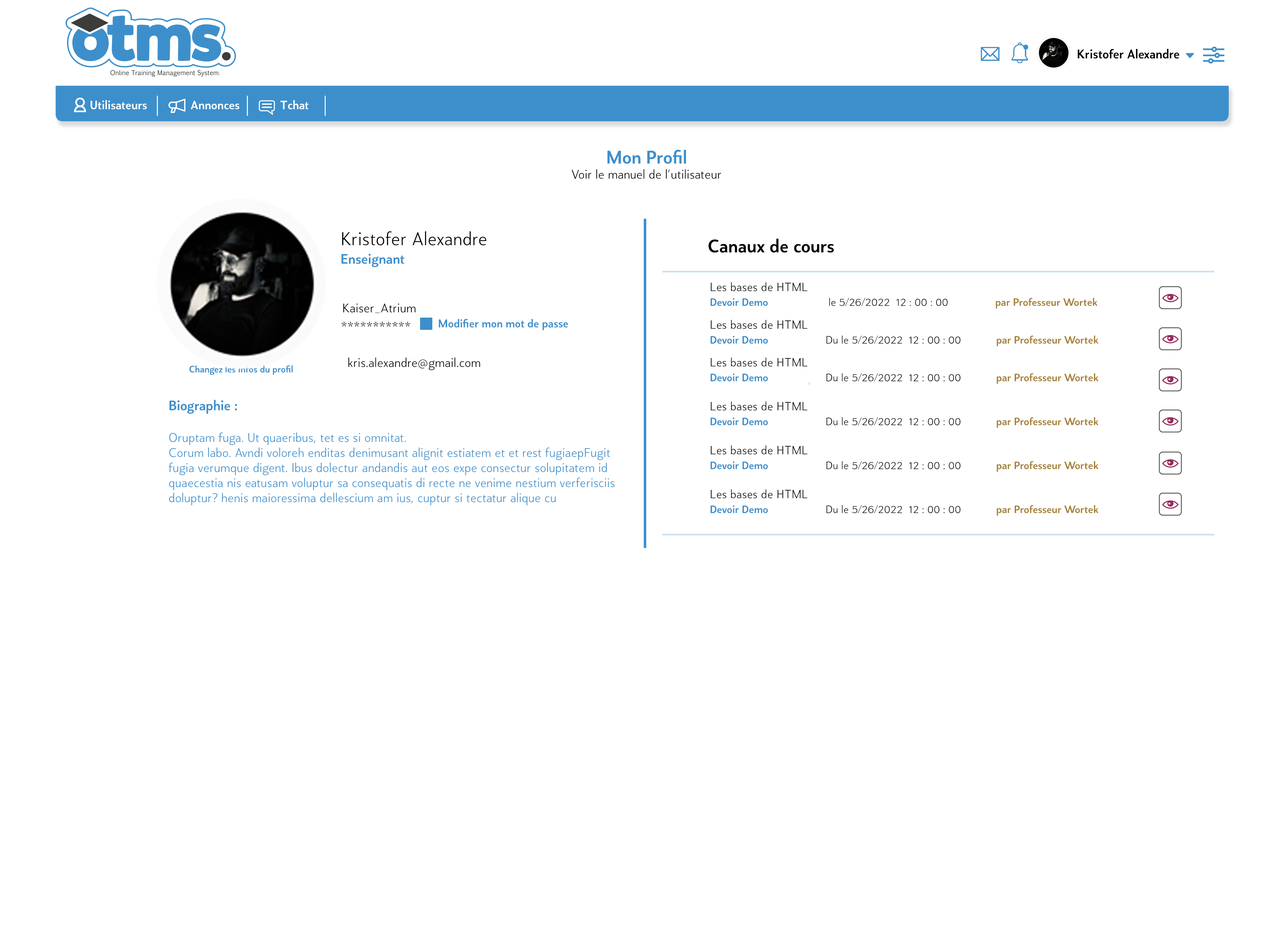
<style>
.page{position:relative;width:1285px;height:928px;background:#ffffff}
.page>*{position:absolute;margin:0}
.t1{font:12.6px "ProdaSans-Medium";color:#000000}
.t2{font:12.1px "ProdaSans-Medium";color:#ffffff}
.t3{font:12.6px "ProdaSans-Light";color:#000000}
.t4{font:18.4px "ProdaSans-Medium";color:#3d8fcb}
.t5{font:18.5px "ProdaSans-Light";color:#000000}
.t6{font:18.4px "ProdaSans-Medium";color:#000000}
.t7{font:13.8px "ProdaSans-Medium";color:#3d8fcb}
.t8{font:11.9px "ProdaSans-Light";color:#000000}
.t9{font:10.7px "ProdaSans-Light";color:#000000}
.t10{font:10.7px "ProdaSans-Medium";color:#3d8fcb}
.t11{font:10.7px "ProdaSans-Medium";color:#a68139}
.t12{font:11.3px "ProdaSans-Medium";color:#3d8fcb}
.t13{font:9.4px "ProdaSans-Medium";color:#3d8fcb}
.t14{font:12.6px "ProdaSans-Light";color:#3d8fcb}
</style>
<div class="page">
<p class="t1" style="left:1078px;top:49px;width:101px;height:10px">Kristofer Alexandre</p>
<p class="t2" style="left:90px;top:100px;width:219px;height:10px">Utilisateurs              Annonces             Tchat</p>
<p class="t3" style="left:572px;top:150px;width:149px;height:29px;text-align:center"><span class="t4">Mon Profil <br></span>Voir le manuel de l‘utilisateur</p>
<p class="t5" style="left:342px;top:231px;width:144px;height:14px">Kristofer Alexandre</p>
<p class="t6" style="left:708px;top:238px;width:126px;height:15px">Canaux de cours</p>
<p class="t7" style="left:341px;top:254px;width:63px;height:13px">Enseignant</p>
<p class="t8" style="left:711px;top:282px;width:97px;height:9px">Les bases de HTML</p>
<p class="t3" style="left:343px;top:303px;width:73px;height:10px">Kaiser_Atrium</p>
<p class="t9" style="left:711px;top:298px;width:387px;height:10px"><span class="t10">Devoir Demo                     </span> le 5/26/2022  12 : 00 : 00                <span class="t11">par Professeur Wortek</span></p>
<p class="t3" style="left:341px;top:322px;width:69px;height:5px">***********</p>
<p class="t12" style="left:439px;top:319px;width:129px;height:11px">Modifier mon mot de passe</p>
<p class="t8" style="left:711px;top:320px;width:97px;height:9px">Les bases de HTML</p>
<p class="t9" style="left:711px;top:335px;width:388px;height:11px"><span class="t10">Devoir Demo                     </span>Du le 5/26/2022  12 : 00 : 00            <span class="t11">par Professeur Wortek</span></p>
<p class="t13" style="left:189px;top:365px;width:104px;height:10px">Changez les infos du profil</p>
<p class="t3" style="left:348px;top:357px;width:132px;height:13px">kris.alexandre@gmail.com</p>
<p class="t8" style="left:711px;top:357px;width:97px;height:9px">Les bases de HTML</p>
<p class="t9" style="left:711px;top:373px;width:388px;height:11px"><span class="t10">Devoir Demo                     </span>Du le 5/26/2022  12 : 00 : 00            <span class="t11">par Professeur Wortek</span></p>
<p class="t14" style="left:169px;top:400px;width:446px;height:105px"><span class="t7">Biographie :<br><br></span>Oruptam fuga. Ut quaeribus, tet es si omnitat.<br>Corum labo. Avndi voloreh enditas denimusant alignit estiatem et et rest fugiaepFugit fugia verumque digent. Ibus dolectur andandis aut eos expe consectur solupitatem id quaecestia nis eatusam voluptur sa consequatis di recte ne venime nestium verferisciis doluptur? henis maioressima dellescium am ius, cuptur si tectatur alique cu</p>
<p class="t8" style="left:711px;top:401px;width:97px;height:9px">Les bases de HTML</p>
<p class="t9" style="left:711px;top:417px;width:388px;height:11px"><span class="t10">Devoir Demo                     </span>Du le 5/26/2022  12 : 00 : 00            <span class="t11">par Professeur Wortek</span></p>
<p class="t8" style="left:711px;top:445px;width:97px;height:9px">Les bases de HTML</p>
<p class="t9" style="left:711px;top:461px;width:388px;height:11px"><span class="t10">Devoir Demo                     </span>Du le 5/26/2022  12 : 00 : 00            <span class="t11">par Professeur Wortek</span></p>
<p class="t8" style="left:711px;top:489px;width:97px;height:9px">Les bases de HTML</p>
<p class="t9" style="left:711px;top:505px;width:388px;height:11px"><span class="t10">Devoir Demo                     </span>Du le 5/26/2022  12 : 00 : 00            <span class="t11">par Professeur Wortek</span></p>
</div>
